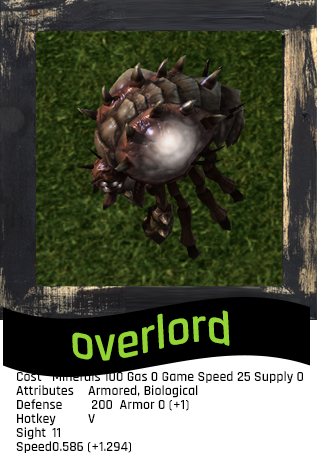
<style>
.page{position:relative;width:318px;height:457px}
.page>*{position:absolute;margin:0}
.t1{font:48px "Rajdhani-Semibold";color:#92d535}
.t2{font:14px/14px "Rajdhani-Semibold";color:#000000}
</style>
<div class="page">
<p class="t1" style="left:72px;top:310px;width:158px;height:51px;rotate:-3deg">overlord</p>
<p class="t2" style="left:16px;top:371px;width:287px;height:82px">Cost Minerals 100 Gas 0 Game Speed 25 Supply 0<br>Attributes Armored, Biological<br>Defense  200  Armor 0 (+1)<br>Hotkey V<br>Sight 11<br>Speed 0.586 (+1.294)</p>
</div>
